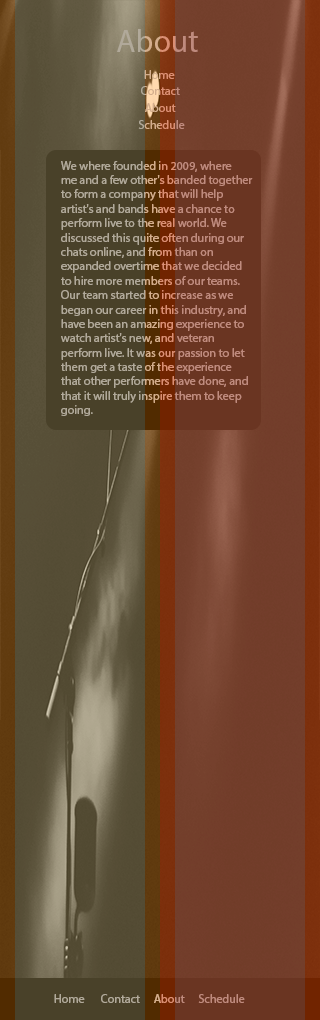
<style>
.page{position:relative;width:320px;height:1020px}
.page>*{position:absolute;margin:0}
.t1{font:31.6px "MyriadPro-Regular"}
.t2{font:12px "MyriadPro-Regular"}
.t3{font:12px "MyriadPro-Regular";color:#b1a99a}
.t4{font:12px "MyriadPro-Regular";color:#bf8b7e}
</style>
<div class="page">
<p class="t1" style="left:117px;top:29px;width:81px;height:23px">About</p>
<p class="t2" style="left:144px;top:70px;width:31px;height:9px">Home</p>
<p class="t2" style="left:141px;top:86px;width:39px;height:9px">Contact</p>
<p class="t2" style="left:145px;top:103px;width:31px;height:9px">About</p>
<p class="t2" style="left:138px;top:120px;width:47px;height:9px">Schedule</p>
<p class="t2" style="left:61px;top:161px;width:192px;height:255px">We where founded in 2009, where <br>me and a few other's banded together <br>to form a company that will help <br>artist's and bands have a chance to <br>perform live to the real world. We <br>discussed this quite often during our <br>chats online, and from than on <br>expanded overtime that we decided <br>to hire more members of our teams. <br>Our team started to increase as we <br>began our career in this industry, and <br>have been an amazing experience to <br>watch artist's new, and veteran <br>perform live. It was our passion to let <br>them get a taste of the experience <br>that other performers have done, and <br>that it will truly inspire them to keep <br>going.</p>
<p class="t3" style="left:54px;top:994px;width:31px;height:9px">Home</p>
<p class="t3" style="left:101px;top:994px;width:39px;height:9px">Contact</p>
<p class="t2" style="left:154px;top:994px;width:31px;height:9px">About</p>
<p class="t4" style="left:198px;top:994px;width:47px;height:9px">Schedule</p>
</div>
